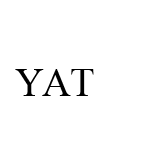
<style>
.page{position:relative;width:168px;height:168px;background:#ffffff}
.page>*{position:absolute;margin:0}
.t1{font:40px "TimesNewRomanPSMT";letter-spacing:-0.04em;color:#000000}
</style>
<div class="page">
<p class="t1" style="left:15px;top:69px;width:79px;height:27px">YAT</p>
</div>
